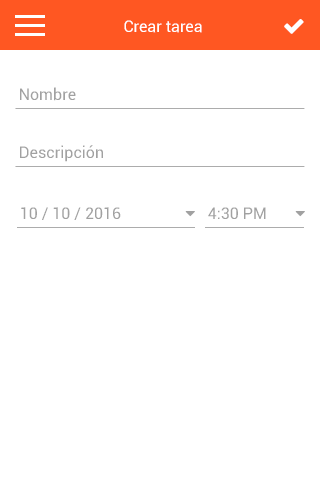
<style>
.page{position:relative;width:320px;height:480px;background:#ffffff}
.page>*{position:absolute;margin:0}
.t1{font:16px "Roboto-Regular";color:#ffffff}
.t2{font:16px "Roboto-Regular";color:#a1a1a1}
</style>
<div class="page">
<p class="t1" style="left:124px;top:20px;width:78px;height:13px">Crear tarea</p>
<p class="t2" style="left:20px;top:87px;width:56px;height:14px">Nombre</p>
<p class="t2" style="left:20px;top:145px;width:83px;height:17px">Descripción</p>
<p class="t2" style="left:21px;top:207px;width:100px;height:13px">10 / 10 / 2016</p>
<p class="t2" style="left:208px;top:207px;width:58px;height:12px">4:30 PM</p>
</div>
